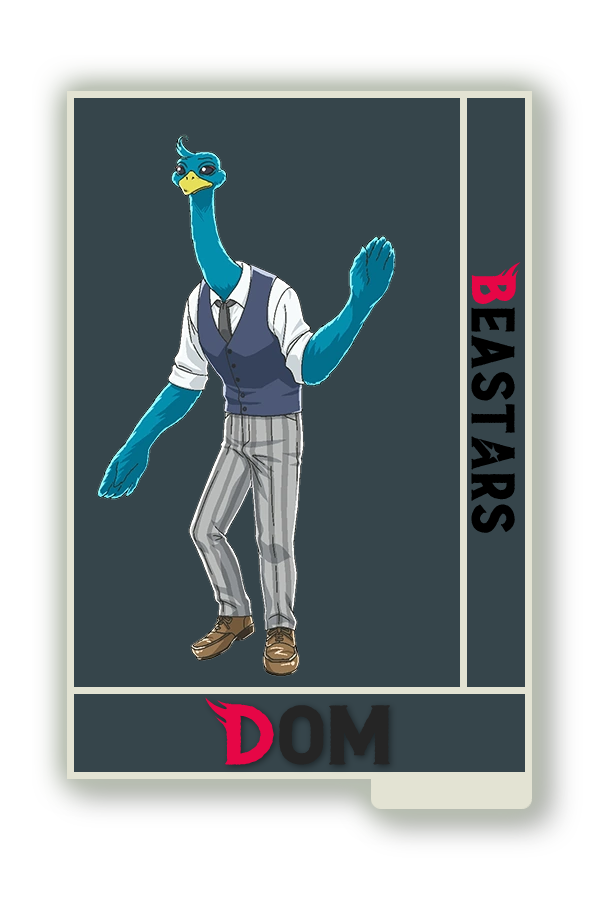
<style>
.page{position:relative;width:600px;height:900px;background:#36454b}
.page>*{position:absolute;margin:0}
.t1{font:48.8px "BEAST";color:#000000}
.t2{font:48.8px "BEAST";color:#e60646}
.t3{font:67px "BEAST";color:#252525;scale:1.12 1}
.t4{font:67px "BEAST";color:#e60646;scale:1.12 1}
</style>
<div class="page">
<p class="t1" style="left:471px;top:262px;width:50px;height:271px;rotate:90deg"><span class="t2">B</span>east@rs</p>
<p class="t3" style="left:205px;top:697px;width:185px;height:68px"><span class="t4">D</span>om</p>
</div>
